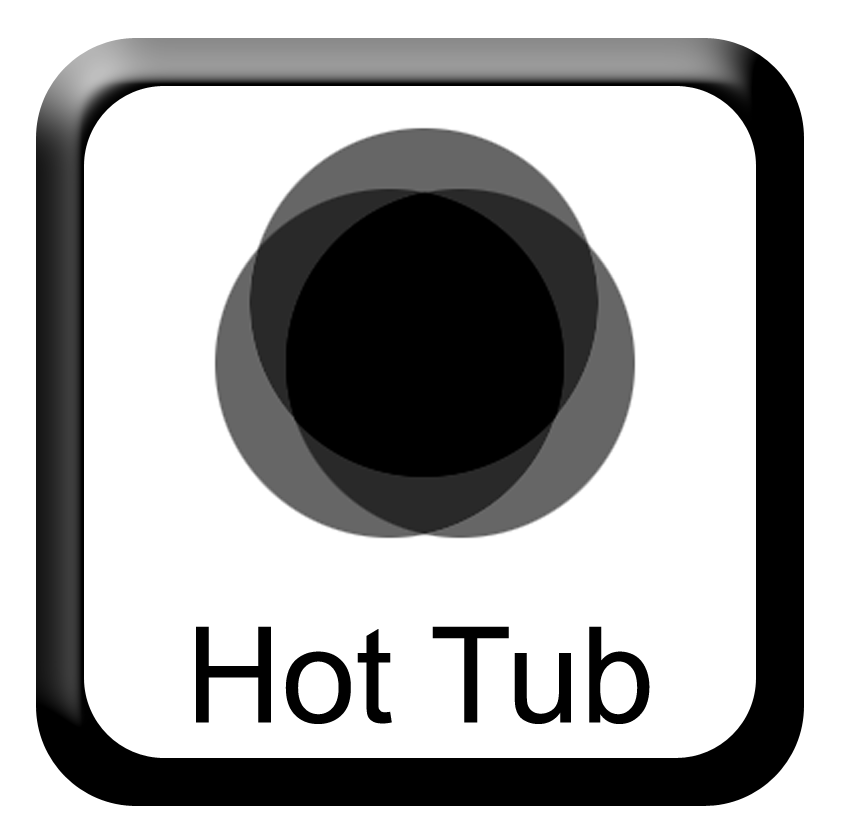
<style>
.page{position:relative;width:844px;height:836px;background:#ffffff}
.page>*{position:absolute;margin:0}
.t1{font:133.3px "ArialMT";color:#000000}
</style>
<div class="page">
<p class="t1" style="left:196px;top:626px;width:454px;height:98px">Hot Tub</p>
</div>
